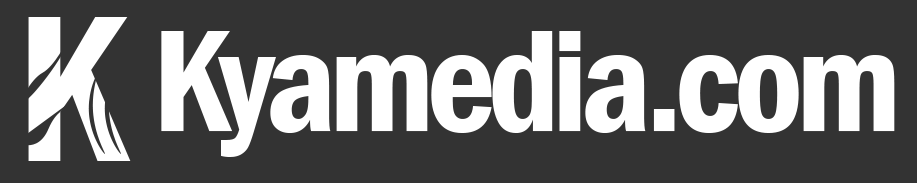
<style>
.page{position:relative;width:917px;height:183px;background:#333333}
.page>*{position:absolute;margin:0}
.t1{font:150px "FranklinGothic-DemiCond";letter-spacing:-0.05em;color:#ffffff}
</style>
<div class="page">
<p class="t1" style="left:161px;top:31px;width:734px;height:126px">Kyamedia.com</p>
</div>
